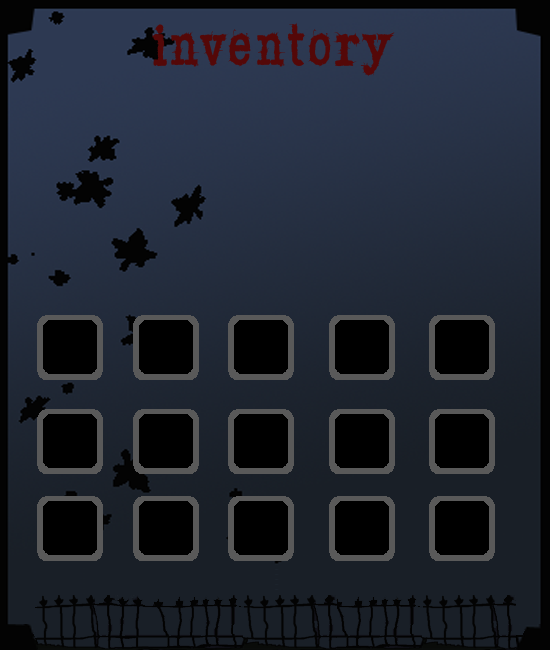
<style>
.page{position:relative;width:550px;height:650px}
.page>*{position:absolute;margin:0}
.t1{font:48px "Pithazard";color:#540808}
</style>
<div class="page">
<p class="t1" style="left:152px;top:22px;width:243px;height:54px">INVENTORY</p>
</div>
